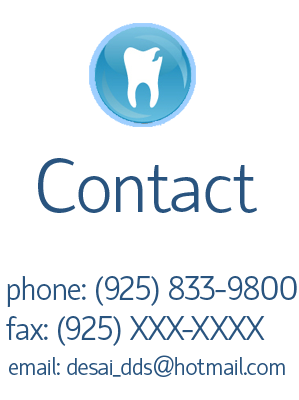
<style>
.page{position:relative;width:299px;height:400px;background:#ffffff}
.page>*{position:absolute;margin:0}
.t1{font:75px "HattoriHanzo-Light";color:#29547f}
.t2{font:33.3px "HattoriHanzo-Light";color:#29547f}
.t3{font:25px "HattoriHanzo-Light";color:#29547f}
</style>
<div class="page">
<p class="t1" style="left:38px;top:158px;width:219px;height:55px">Contact</p>
<p class="t2" style="left:6px;top:276px;width:291px;height:70px">phone: (925) 833-9800<br>fax: (925) XXX-XXXX</p>
<p class="t3" style="left:9px;top:355px;width:276px;height:22px">email: desai_dds@hotmail.com</p>
</div>
